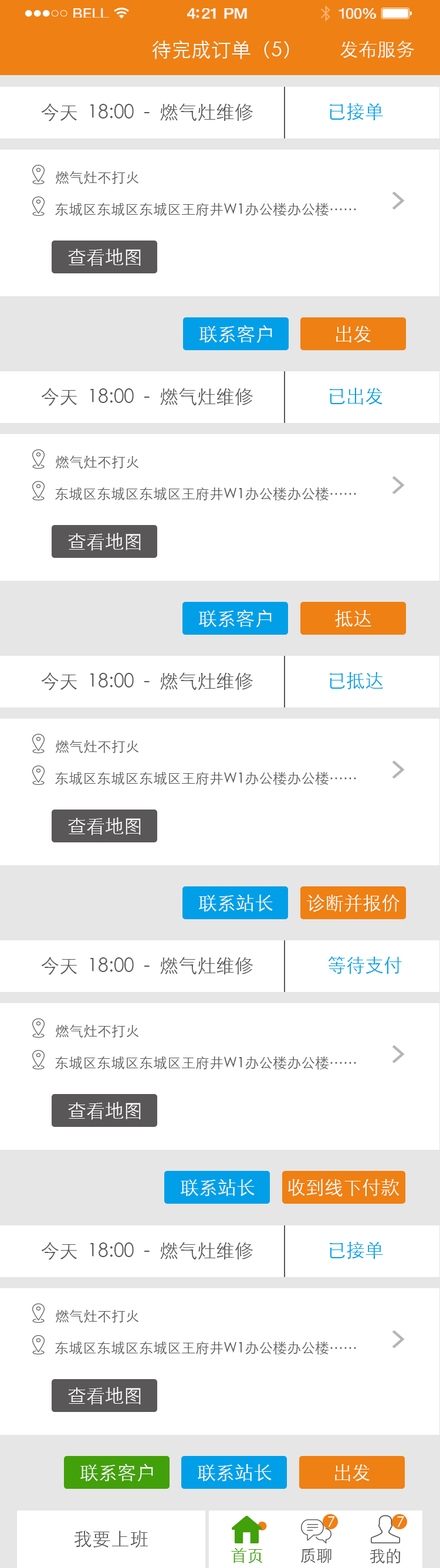
<style>
.page{position:relative;width:440px;height:1568px;background:#ffffff}
.page>*{position:absolute;margin:0}
.t1{font:13.6px "HelveticaNeue";letter-spacing:0.02em;color:#ffffff;scale:1.06 1}
.t2{font:14.8px "HelveticaNeue-Medium";letter-spacing:-0.02em;color:#ffffff;scale:1.06 1}
.t3{font:14.2px "HelveticaNeue";letter-spacing:-0.02em;color:#ffffff;scale:1.06 1}
.t4{font:19.9px "STXihei";color:#ffffff}
.t5{font:18.8px "STXihei";color:#ffffff}
.t6{font:18.8px "STXihei";color:#595757}
.t7{font:18.8px "STXihei";color:#009fe8}
.t8{font:14.1px "STXihei";color:#595757}
.t9{font:14.1px "STXihei";color:#ffffff}
.t10{font:16.4px "STXihei";color:#42a00a}
.t11{font:16.4px "STXihei";color:#595757}
</style>
<div class="page">
<p class="t1" style="left:73px;top:8px;width:36px;height:10px">BELL</p>
<p class="t2" style="left:187px;top:8px;width:60px;height:11px">4:21 PM</p>
<p class="t3" style="left:338px;top:8px;width:38px;height:11px">100%</p>
<p class="t4" style="left:152px;top:40px;width:137px;height:19px">待完成订单（5）</p>
<p class="t5" style="left:340px;top:40px;width:74px;height:18px">发布服务</p>
<p class="t6" style="left:41px;top:103px;width:212px;height:18px">今天  18:00  -  燃气灶维修</p>
<p class="t7" style="left:330px;top:103px;width:53px;height:17px">已接单</p>
<p class="t8" style="left:56px;top:171px;width:82px;height:13px">燃气灶不打火</p>
<p class="t8" style="left:55px;top:202px;width:301px;height:14px">东城区东城区东城区王府井W1办公楼办公楼……</p>
<p class="t5" style="left:68px;top:248px;width:73px;height:18px">查看地图</p>
<p class="t5" style="left:199px;top:325px;width:73px;height:18px">联系客户</p>
<p class="t5" style="left:336px;top:326px;width:35px;height:17px">出发</p>
<p class="t6" style="left:41px;top:388px;width:212px;height:18px">今天  18:00  -  燃气灶维修</p>
<p class="t7" style="left:330px;top:388px;width:52px;height:17px">已出发</p>
<p class="t8" style="left:56px;top:455px;width:82px;height:14px">燃气灶不打火</p>
<p class="t8" style="left:55px;top:487px;width:301px;height:13px">东城区东城区东城区王府井W1办公楼办公楼……</p>
<p class="t5" style="left:68px;top:533px;width:73px;height:18px">查看地图</p>
<p class="t5" style="left:199px;top:609px;width:73px;height:19px">联系客户</p>
<p class="t5" style="left:335px;top:610px;width:36px;height:17px">抵达</p>
<p class="t6" style="left:41px;top:672px;width:212px;height:18px">今天  18:00  -  燃气灶维修</p>
<p class="t7" style="left:330px;top:672px;width:53px;height:17px">已抵达</p>
<p class="t8" style="left:56px;top:740px;width:82px;height:13px">燃气灶不打火</p>
<p class="t8" style="left:55px;top:771px;width:301px;height:14px">东城区东城区东城区王府井W1办公楼办公楼……</p>
<p class="t5" style="left:68px;top:817px;width:73px;height:18px">查看地图</p>
<p class="t5" style="left:199px;top:895px;width:74px;height:17px">联系站长</p>
<p class="t5" style="left:307px;top:895px;width:92px;height:17px">诊断并报价</p>
<p class="t6" style="left:41px;top:957px;width:212px;height:18px">今天  18:00  -  燃气灶维修</p>
<p class="t7" style="left:328px;top:956px;width:74px;height:18px">等待支付</p>
<p class="t8" style="left:56px;top:1024px;width:82px;height:14px">燃气灶不打火</p>
<p class="t8" style="left:55px;top:1056px;width:301px;height:13px">东城区东城区东城区王府井W1办公楼办公楼……</p>
<p class="t5" style="left:68px;top:1102px;width:73px;height:18px">查看地图</p>
<p class="t5" style="left:181px;top:1179px;width:74px;height:17px">联系站长</p>
<p class="t5" style="left:288px;top:1179px;width:111px;height:18px">收到线下付款</p>
<p class="t6" style="left:41px;top:1242px;width:212px;height:18px">今天  18:00  -  燃气灶维修</p>
<p class="t7" style="left:330px;top:1242px;width:53px;height:17px">已接单</p>
<p class="t8" style="left:56px;top:1309px;width:82px;height:14px">燃气灶不打火</p>
<p class="t8" style="left:55px;top:1341px;width:301px;height:13px">东城区东城区东城区王府井W1办公楼办公楼……</p>
<p class="t5" style="left:68px;top:1387px;width:73px;height:18px">查看地图</p>
<p class="t5" style="left:80px;top:1464px;width:73px;height:18px">联系客户</p>
<p class="t5" style="left:198px;top:1464px;width:74px;height:17px">联系站长</p>
<p class="t5" style="left:335px;top:1464px;width:35px;height:17px">出发</p>
<p class="t9" style="left:328px;top:1516px;width:7px;height:11px">7</p>
<p class="t9" style="left:397px;top:1516px;width:7px;height:11px">7</p>
<p class="t6" style="left:74px;top:1530px;width:74px;height:18px">我要上班</p>
<p class="t10" style="left:231px;top:1547px;width:31px;height:16px">首页</p>
<p class="t11" style="left:301px;top:1548px;width:30px;height:15px">质聊</p>
<p class="t11" style="left:370px;top:1549px;width:31px;height:15px">我的</p>
</div>
